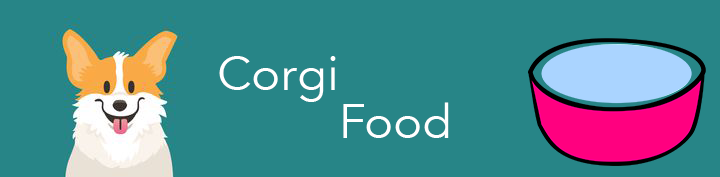
<style>
.page{position:relative;width:720px;height:177px;background:#278587}
.page>*{position:absolute;margin:0}
.t1{font:48px "AvenirNext-Regular";color:#ffffff}
</style>
<div class="page">
<p class="t1" style="left:219px;top:56px;width:117px;height:46px">Corgi</p>
<p class="t1" style="left:343px;top:102px;width:106px;height:36px">Food</p>
</div>
